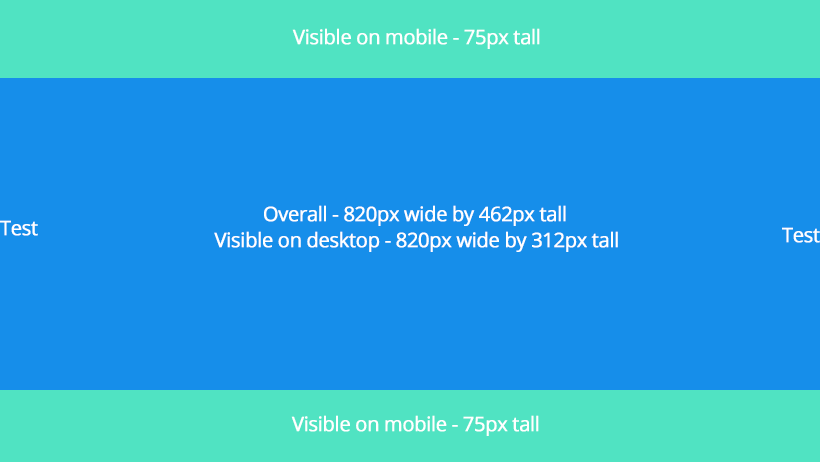
<style>
.page{position:relative;width:820px;height:462px;background:#168eea}
.page>*{position:absolute;margin:0}
.t1{font:20px "OpenSans";letter-spacing:-0.04em;color:#ffffff;font-weight:bold}
</style>
<div class="page">
<p class="t1" style="left:292px;top:28px;width:248px;height:21px">Visible on mobile - 75px tall</p>
<p class="t1" style="left:264px;top:205px;width:302px;height:21px">Overall - 820px wide by 462px tall</p>
<p class="t1" style="left:0px;top:220px;width:38px;height:16px">Test</p>
<p class="t1" style="left:214px;top:231px;width:404px;height:21px">Visible on desktop - 820px wide by 312px tall</p>
<p class="t1" style="left:782px;top:227px;width:38px;height:16px">Test</p>
<p class="t1" style="left:291px;top:415px;width:248px;height:21px">Visible on mobile - 75px tall</p>
</div>
